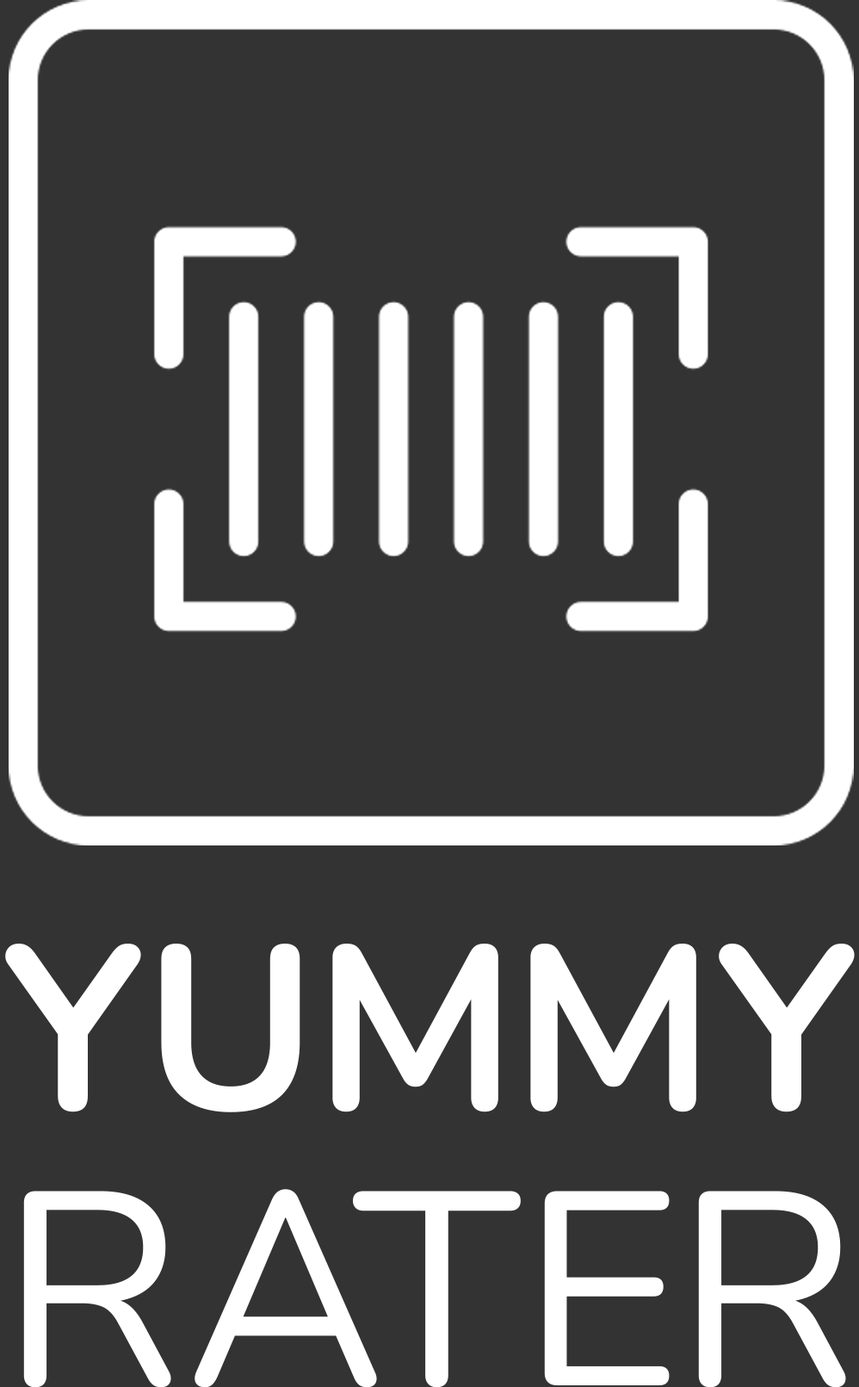
<style>
.page{position:relative;width:859px;height:1387px;background:#333333}
.page>*{position:absolute;margin:0}
.t1{font:233.1px/300.5px "Nunito-Bold";color:#ffffff}
.t2{font:275.4px/275.4px "Nunito-Regular";color:#ffffff}
</style>
<div class="page">
<p class="t1" style="left:5px;top:944px;width:850px;height:444px;text-align:center">YUMMY<br><span class="t2">RATER</span></p>
</div>
